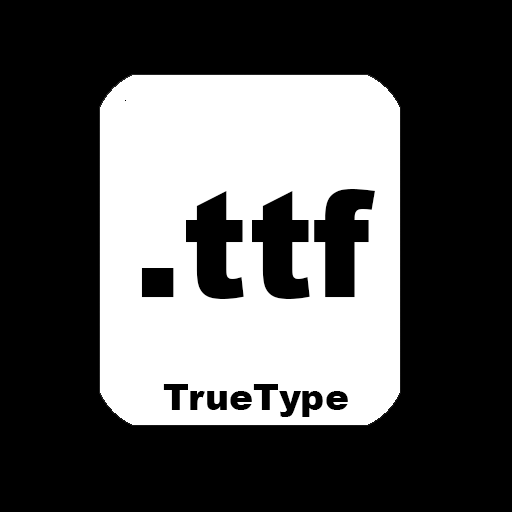
<style>
.page{position:relative;width:512px;height:512px;background:#000000}
.page>*{position:absolute;margin:0}
.t1{font:147.8px "Arial-Black";color:#000000}
.t2{font:36px "Arial-Black";color:#000000}
</style>
<div class="page">
<p class="t1" style="left:141px;top:189px;width:234px;height:110px">.ttf</p>
<p class="t2" style="left:163px;top:384px;width:185px;height:33px">TrueType</p>
</div>
